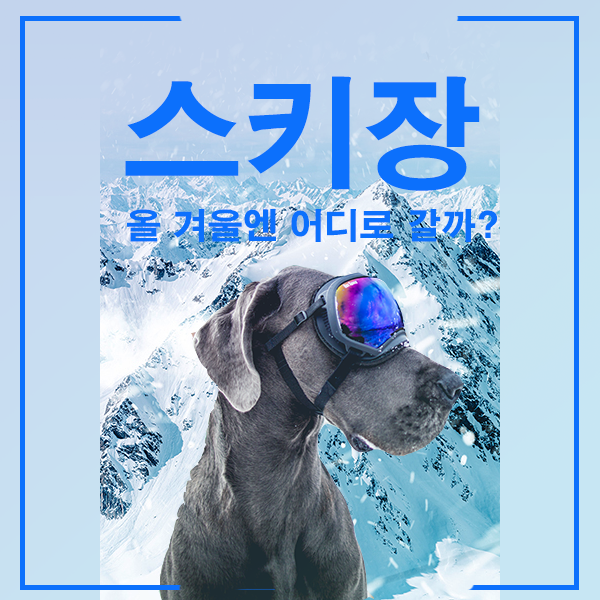
<style>
.page{position:relative;width:600px;height:600px}
.page>*{position:absolute;margin:0}
.t1{font:120px "H2gtrE";color:#0c70fc}
.t2{font:12px "Gulim";color:#000000}
.t3{font:35px "H2gtrE";color:#0c70fc}
</style>
<div class="page">
<p class="t1" style="left:125px;top:76px;width:355px;height:115px"><span class="t2"> </span>스키장</p>
<p class="t3" style="left:127px;top:209px;width:370px;height:33px">올 겨울엔 어디로 갈까?</p>
</div>
